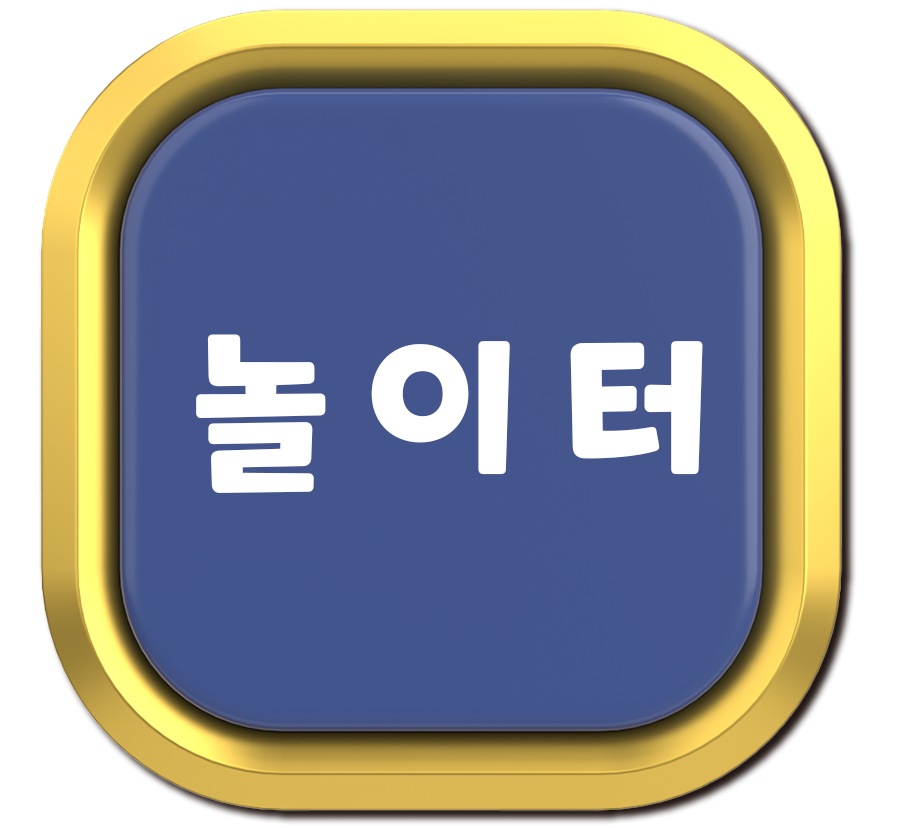
<style>
.page{position:relative;width:900px;height:828px;background:#ffffff}
.page>*{position:absolute;margin:0}
.t1{font:173.3px "ONEMobilePOPRegular";color:#ffffff}
</style>
<div class="page">
<p class="t1" style="left:196px;top:334px;width:507px;height:159px">놀 이 터</p>
</div>
